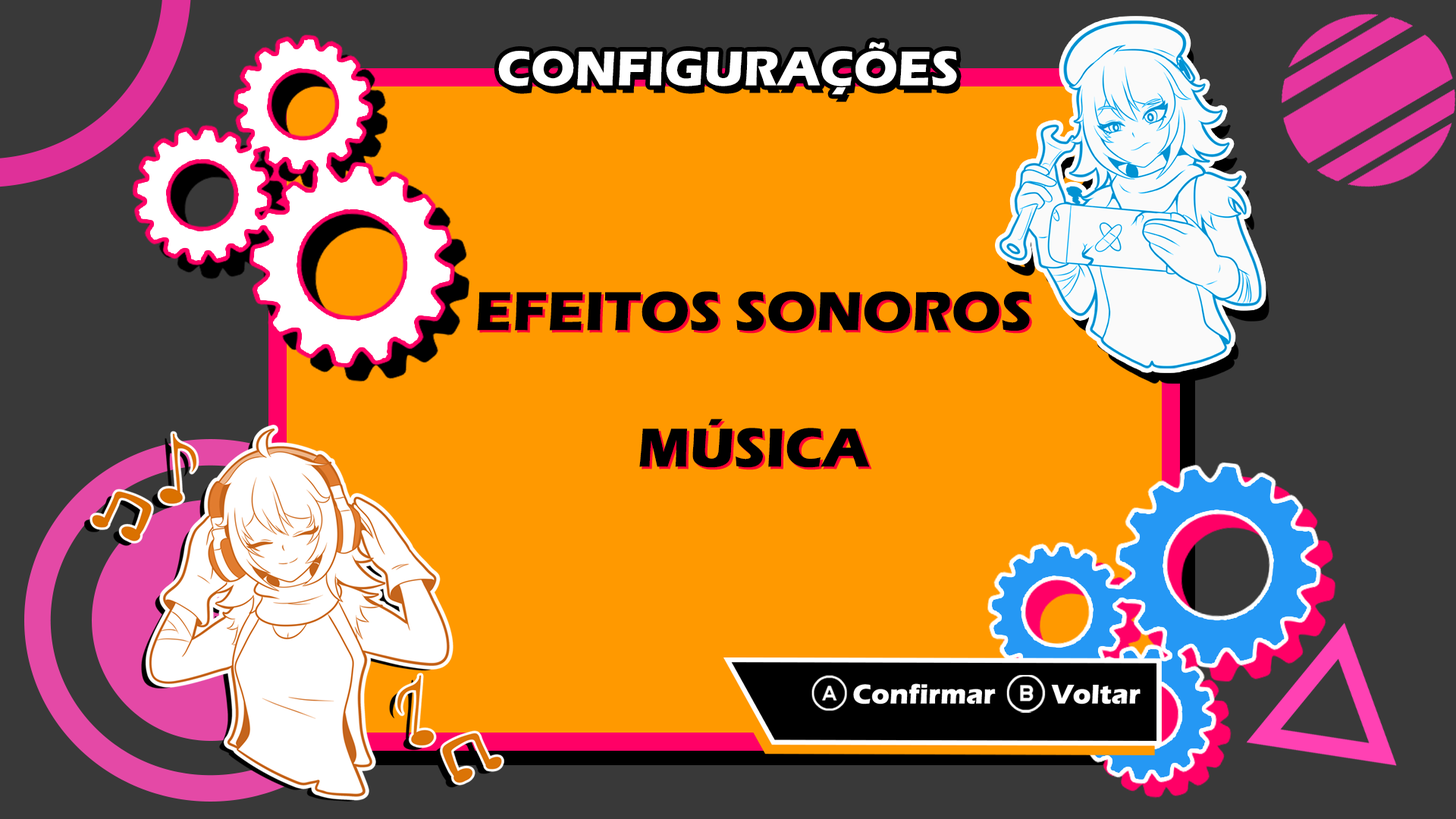
<style>
.page{position:relative;width:1456px;height:819px;background:#ff9900}
.page>*{position:absolute;margin:0}
.t1{font:50.6px "ErasITC-Bold";color:#ffffff}
.t2{font:56.9px "ErasITC-Bold";color:#000000}
</style>
<div class="page">
<p class="t1" style="left:498px;top:42px;width:459px;height:53px">CONFIGURAÇÕES</p>
<p class="t2" style="left:477px;top:291px;width:553px;height:177px;text-align:center">EFEITOS SONOROS<br><br>MÚSICA</p>
</div>
